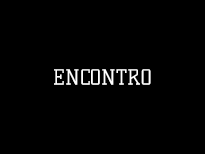
<style>
.page{position:relative;width:205px;height:154px;background:#000000}
.page>*{position:absolute;margin:0}
.t1{font:20.8px "KellySlab-Regular";color:#ffffff}
</style>
<div class="page">
<p class="t1" style="left:54px;top:69px;width:97px;height:16px">ENCONTRO</p>
</div>
